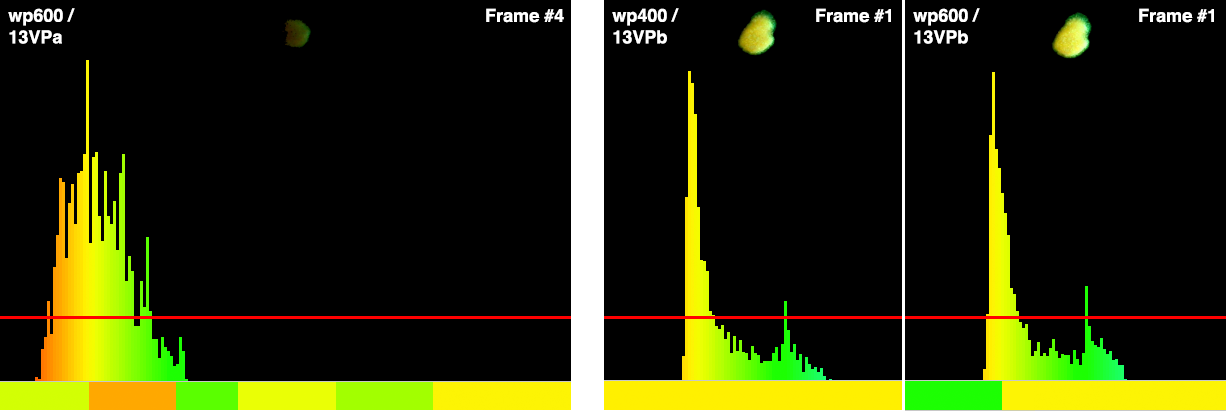
<style>
.page{position:relative;width:1226px;height:411px;background:#000000}
.page>*{position:absolute;margin:0}
.t1{font:18px "Helvetica-Bold";color:#ffffff}
</style>
<div class="page">
<p class="t1" style="left:8px;top:8px;width:67px;height:36px">wp600 /<br>13VPa</p>
<p class="t1" style="left:486px;top:8px;width:78px;height:15px">Frame #4</p>
<p class="t1" style="left:612px;top:8px;width:67px;height:36px">wp400 /<br>13VPb</p>
<p class="t1" style="left:816px;top:8px;width:75px;height:15px">Frame #1</p>
<p class="t1" style="left:913px;top:8px;width:67px;height:36px">wp600 /<br>13VPb</p>
<p class="t1" style="left:1139px;top:8px;width:75px;height:15px">Frame #1</p>
</div>
